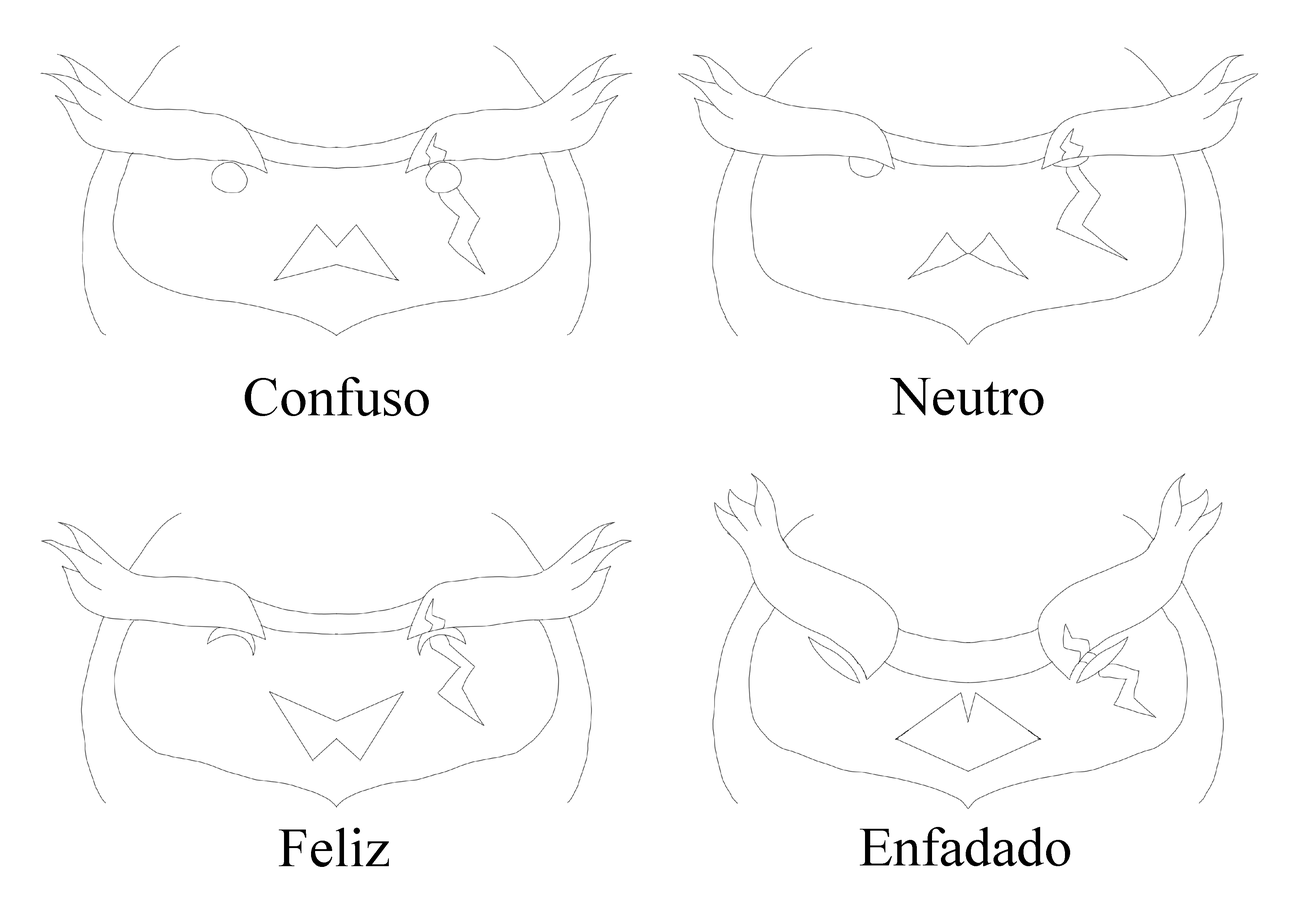
<style>
.page{position:relative;width:1299px;height:918px;background:#ffffff}
.page>*{position:absolute;margin:0}
.t1{font:55.5px "TimesNewRomanPSMT";color:#000000}
</style>
<div class="page">
<p class="t1" style="left:245px;top:377px;width:184px;height:39px">Confuso</p>
<p class="t1" style="left:890px;top:378px;width:153px;height:37px">Neutro</p>
<p class="t1" style="left:279px;top:828px;width:110px;height:39px">Feliz</p>
<p class="t1" style="left:860px;top:827px;width:210px;height:39px">Enfadado</p>
</div>
